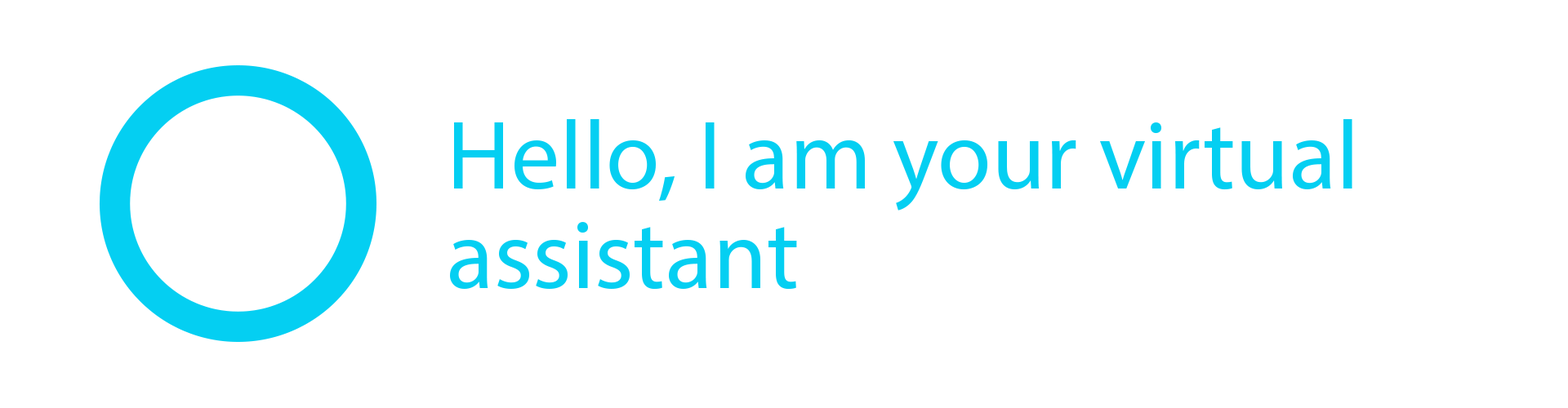
<style>
.page{position:relative;width:1568px;height:408px;background:#ffffff}
.page>*{position:absolute;margin:0}
.t1{font:98px/99.6px "MyriadPro-Regular";color:#04cff2}
</style>
<div class="page">
<p class="t1" style="left:450px;top:119px;width:902px;height:171px">Hello, I am your virtual assistant</p>
</div>
